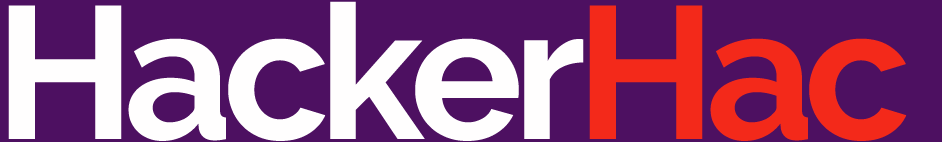
<style>
.page{position:relative;width:942px;height:142px;background:#4d1061}
.page>*{position:absolute;margin:0}
.t1{font:187.9px "Raleway-Bold";letter-spacing:-0.05em;color:#fffefe}
.t2{font:187.9px "Raleway-Bold";letter-spacing:-0.05em;color:#f3291a}
</style>
<div class="page">
<p class="t1" style="left:8px;top:1px;width:899px;height:140px">Hacker<span class="t2">Hac</span></p>
</div>
